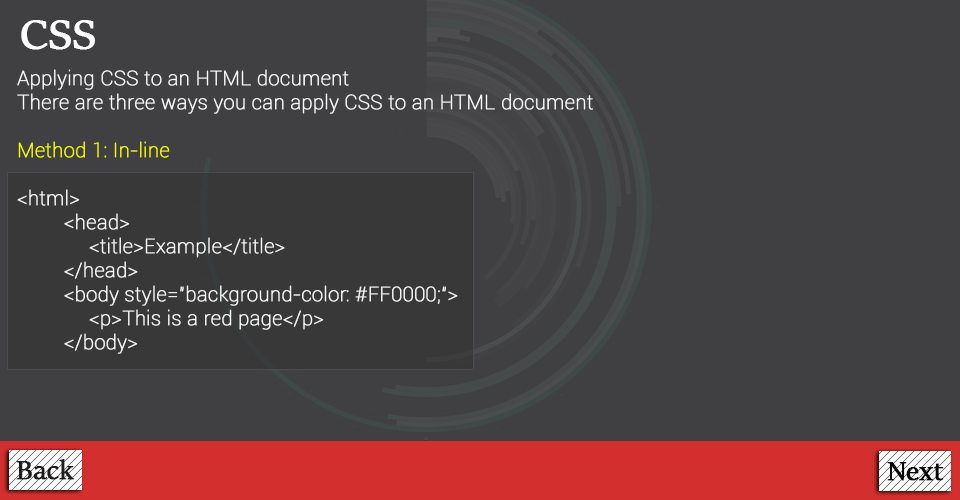
<style>
.page{position:relative;width:960px;height:500px;background:#404042}
.page>*{position:absolute;margin:0}
.t1{font:48px "SitkaBanner";color:#ffffff;font-weight:bold}
.t2{font:20px "Roboto-Thin";color:#ffffff;font-weight:bold}
.t3{font:20px "Roboto-Thin";color:#fcff00;font-weight:bold}
.t4{font:30px "SitkaBanner";color:#1e1e1e;font-weight:bold}
.t5{font:30px "SitkaBanner";color:#060606;font-weight:bold}
</style>
<div class="page">
<p class="t1" style="left:21px;top:20px;width:74px;height:30px">CSS</p>
<p class="t2" style="left:17px;top:69px;width:576px;height:285px">Applying CSS to an HTML document<br>There are three ways you can apply CSS to an HTML document<br><br><span class="t3">Method 1: In-line <br><br></span>&lt;html&gt;<br>   &lt;head&gt;<br>  &lt;title&gt;Example&lt;/title&gt;<br>   &lt;/head&gt;<br>   &lt;body style="background-color: #FF0000;"&gt;<br>  &lt;p&gt;This is a red page&lt;/p&gt;<br>   &lt;/body&gt;<br> &lt;/html&gt;</p>
<p class="t4" style="left:16px;top:459px;width:59px;height:21px">Back</p>
<p class="t5" style="left:887px;top:462px;width:57px;height:19px">Next</p>
</div>
